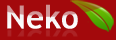
<style>
.page{position:relative;width:116px;height:40px;background:#a3090c}
.page>*{position:absolute;margin:0}
.t1{font:31.5px "TrebuchetMS";font-weight:bold}
</style>
<div class="page">
<p class="t1" style="left:7px;top:4px;width:71px;height:25px">Neko</p>
</div>
